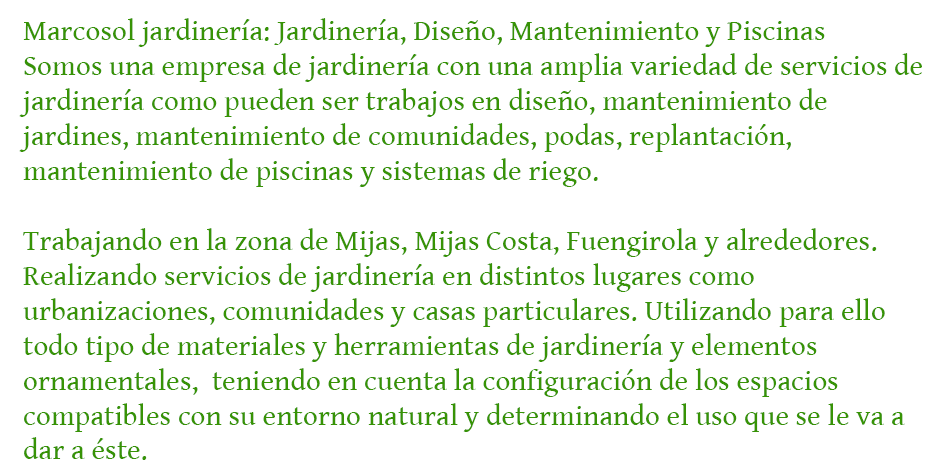
<style>
.page{position:relative;width:949px;height:472px;background:#ffffff}
.page>*{position:absolute;margin:0}
.t1{font:29.1px "GentiumBookBasic";color:#379305}
</style>
<div class="page">
<p class="t1" style="left:19px;top:18px;width:903px;height:442px">Marcosol jardinería: Jardinería, Diseño, Mantenimiento y Piscinas<br>Somos una empresa de jardinería con una amplia variedad de servicios de jardinería como pueden ser trabajos en diseño, mantenimiento de jardines, mantenimiento de comunidades, podas, replantación, mantenimiento de piscinas y sistemas de riego.<br><br>Trabajando en la zona de Mijas, Mijas Costa, Fuengirola y alrededores. Realizando servicios de jardinería en distintos lugares como urbanizaciones, comunidades y casas particulares. Utilizando para ello todo tipo de materiales y herramientas de jardinería y elementos ornamentales,  teniendo en cuenta la configuración de los espacios compatibles con su entorno natural y determinando el uso que se le va a dar a éste.</p>
</div>
